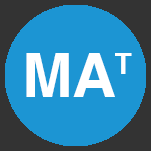
<style>
.page{position:relative;width:151px;height:151px;background:#1c95d3}
.page>*{position:absolute;margin:0}
.t1{font:60.8px "Helvetica-Bold";color:#ffffff}
.t2{font:28.4px "Helvetica-Bold";color:#ffffff}
</style>
<div class="page">
<p class="t1" style="left:26px;top:53px;width:89px;height:44px">MA</p>
<p class="t2" style="left:115px;top:53px;width:17px;height:21px">T</p>
</div>
